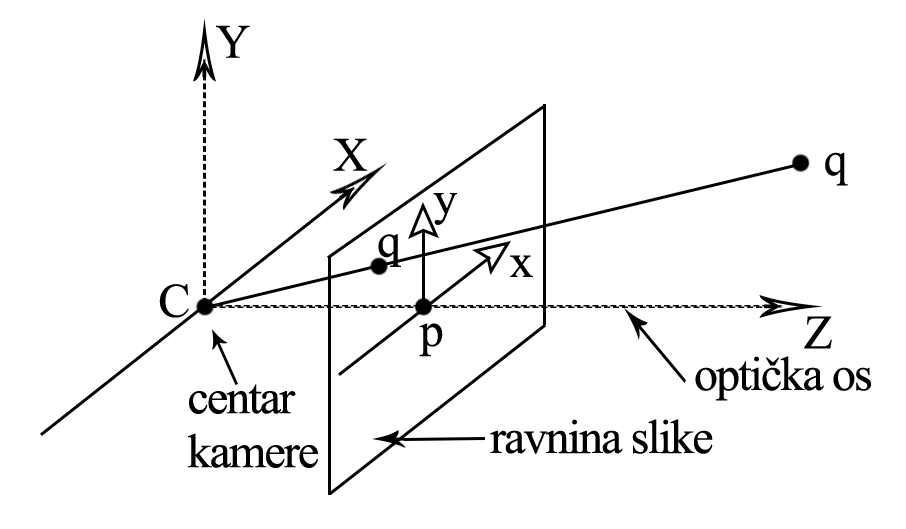
<style>
.page{position:relative;width:906px;height:529px;background:#ffffff}
.page>*{position:absolute;margin:0}
.t1{font:48px "TimesNewRomanPSMT";letter-spacing:-0.04em;color:#000000}
.t2{font:48px/42px "TimesNewRomanPSMT";letter-spacing:-0.04em;color:#000000}
</style>
<div class="page">
<p class="t1" style="left:216px;top:25px;width:34px;height:33px">Y</p>
<p class="t1" style="left:333px;top:138px;width:35px;height:33px">X</p>
<p class="t1" style="left:825px;top:152px;width:23px;height:34px">q</p>
<p class="t1" style="left:433px;top:193px;width:24px;height:32px">y</p>
<p class="t1" style="left:378px;top:234px;width:23px;height:33px">q</p>
<p class="t1" style="left:510px;top:255px;width:23px;height:22px">x</p>
<p class="t1" style="left:159px;top:284px;width:30px;height:34px">C</p>
<p class="t1" style="left:804px;top:316px;width:28px;height:33px">Z</p>
<p class="t1" style="left:419px;top:323px;width:24px;height:34px">p</p>
<p class="t1" style="left:695px;top:356px;width:176px;height:45px">optička os</p>
<p class="t2" style="left:187px;top:384px;width:131px;height:84px">centar<br>kamere</p>
<p class="t1" style="left:490px;top:419px;width:223px;height:35px">ravnina slike</p>
</div>
